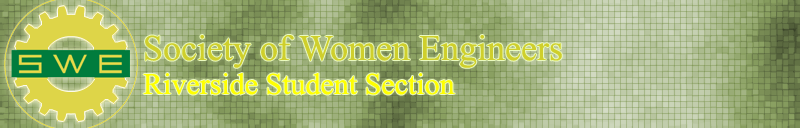
<style>
.page{position:relative;width:800px;height:128px}
.page>*{position:absolute;margin:0}
.t1{font:36px/34px "TimesNewRomanPSMT";color:#cfcf2c}
.t2{font:30px/34px "TimesNewRomanPSMT";color:#ffff00}
</style>
<div class="page">
<p class="t1" style="left:143px;top:35px;width:419px;height:60px">Society of Women Engineers<br><span class="t2">Riverside Student Section</span></p>
</div>
